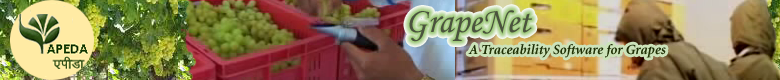
<style>
.page{position:relative;width:780px;height:80px}
.page>*{position:absolute;margin:0}
.t1{font:36px "MonotypeCorsiva";color:#4b533e}
.t2{font:14px "Minion-BoldItalic";color:#2e4709}
</style>
<div class="page">
<p class="t1" style="left:409px;top:10px;width:123px;height:32px">GrapeNet</p>
<p class="t2" style="left:468px;top:44px;width:198px;height:14px">A Traceability Software for Grapes</p>
</div>
